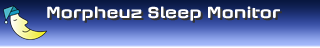
<style>
.page{position:relative;width:320px;height:48px}
.page>*{position:absolute;margin:0}
.t1{font:16.6px "AxaxaxRg-Bold";color:#ffffff}
.t2{font:16.6px "AxaxaxRg-Bold"}
</style>
<div class="page">
<p class="t1" style="left:47px;top:6px;width:233px;height:15px">Morpheuz Sleep Monitor</p>
<p class="t2" style="left:49px;top:8px;width:233px;height:15px">Morpheuz Sleep Monitor</p>
</div>
